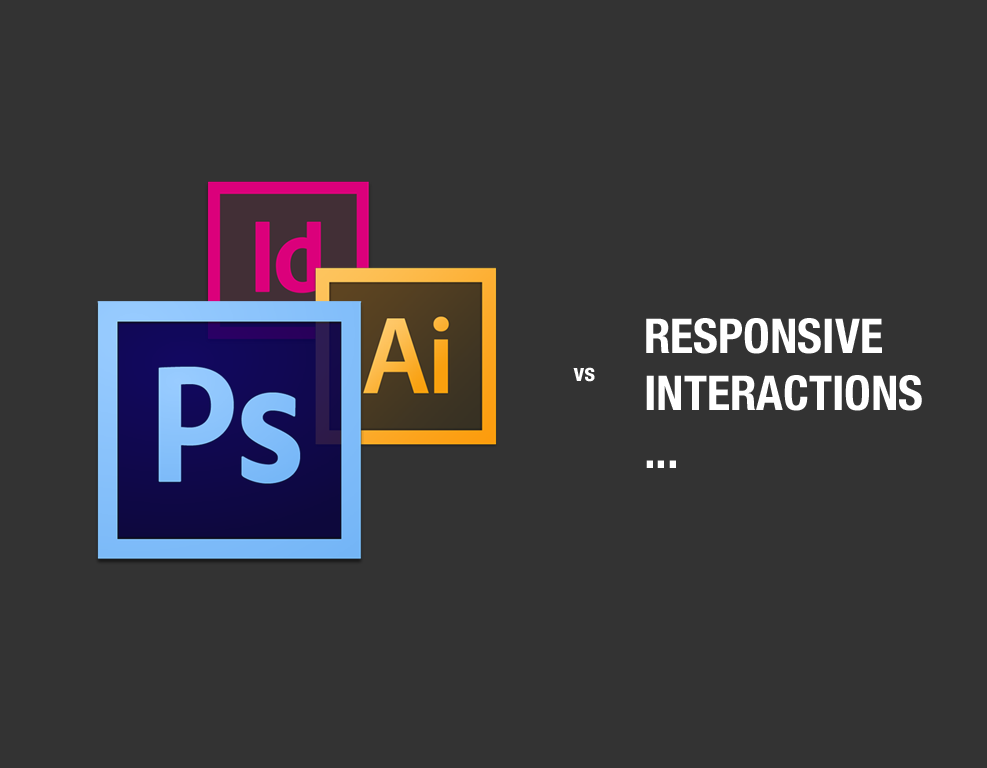
<style>
.page{position:relative;width:987px;height:768px;background:#333333}
.page>*{position:absolute;margin:0}
.t1{font:48px "HelveticaNeue-CondensedBold";color:#ffffff}
.t2{font:24px "HelveticaNeue-CondensedBold";color:#ffffff}
</style>
<div class="page">
<p class="t1" style="left:646px;top:318px;width:276px;height:150px">RESPONSIVE<br>INTERACTIONS<br>...</p>
<p class="t2" style="left:573px;top:367px;width:22px;height:15px">vs</p>
</div>
